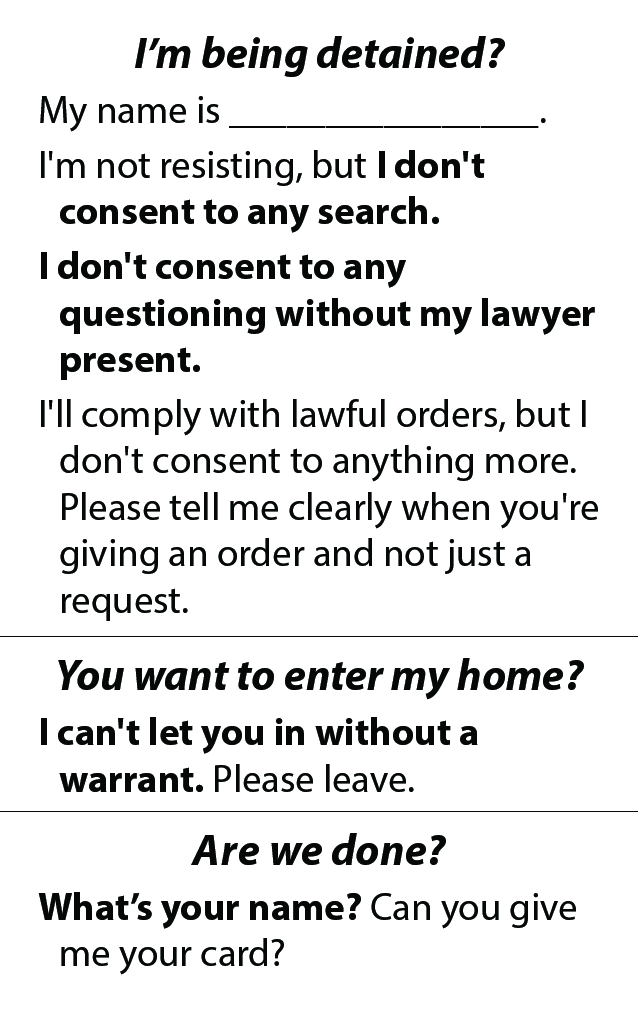
<style>
.page{position:relative;width:638px;height:1011px;background:#ffffff}
.page>*{position:absolute;margin:0}
.t1{font:38.7px "MyriadPro-Regular";color:#060808}
.t2{font:43.7px "MyriadPro-BoldIt";color:#060808}
.t3{font:38.7px "MyriadPro-Bold";color:#060808}
.t4{font:43.7px "MyriadPro-BoldIt";letter-spacing:0.02em;color:#060808}
</style>
<div class="page">
<p class="t1" style="left:38px;top:36px;width:560px;height:939px;text-align:center"><span class="t2">I’m being detained?<br></span>My name is ________________.<br>I'm not resisting, but <span class="t3">I don't consent to any search. <br>I don't consent to any questioning without my lawyer present.<br></span>I'll comply with lawful orders, but I don't consent to anything more. Please tell me clearly when you're giving an order and not just a request.<br><span class="t2">You want to enter my home?<br></span><span class="t3">I can't let you in without a warrant. </span>Please leave.<br><span class="t4">Are </span><span class="t2">we done?<br></span><span class="t3">What’s your name? </span>Can you give me your card?</p>
</div>
